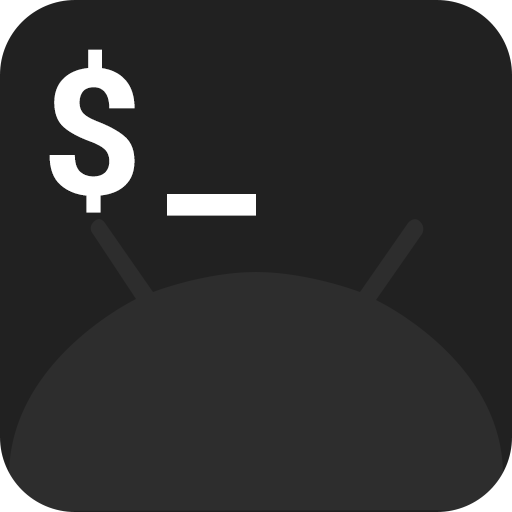
<style>
.page{position:relative;width:512px;height:512px;background:#212121}
.page>*{position:absolute;margin:0}
.t1{font:175px "Roboto-Bold";letter-spacing:0.14em;color:#ffffff}
.t2{font:200px "Roboto-Bold";letter-spacing:0.14em;color:#ffffff}
</style>
<div class="page">
<p class="t1" style="left:49px;top:49px;width:207px;height:167px">$<span class="t2">_</span></p>
</div>
